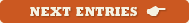
<style>
.page{position:relative;width:189px;height:23px;background:#cb5821}
.page>*{position:absolute;margin:0}
.t1{font:12px "Rockwell-ExtraBold";letter-spacing:0.01em;color:#f5f2e2;text-transform:uppercase}
</style>
<div class="page">
<p class="t1" style="left:30px;top:7px;width:107px;height:9px">Next Entries</p>
</div>
